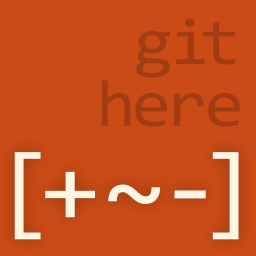
<style>
.page{position:relative;width:256px;height:256px;background:#cb4b16}
.page>*{position:absolute;margin:0}
.t1{font:66px "Consolas";color:#a23c12;scale:1.1 1}
.t2{font:96px "Consolas";color:#fdf6e3;scale:1.1 1}
</style>
<div class="page">
<p class="t1" style="left:136px;top:18px;width:100px;height:60px">git</p>
<p class="t1" style="left:101px;top:80px;width:139px;height:47px">here</p>
<p class="t2" style="left:14px;top:152px;width:225px;height:88px">[+~-]</p>
</div>
